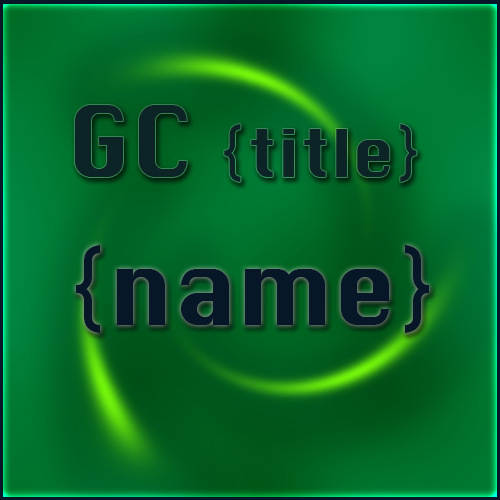
<style>
.page{position:relative;width:500px;height:500px}
.page>*{position:absolute;margin:0}
.t1{font:64px "Silom";color:#0d2427}
.t2{font:96px "Silom";color:#0d2427}
.t3{font:96px "Silom";color:#081728}
</style>
<div class="page">
<p class="t1" style="left:74px;top:105px;width:343px;height:77px"><span class="t2">GC </span>{title}</p>
<p class="t3" style="left:76px;top:245px;width:353px;height:88px">{name}</p>
</div>
